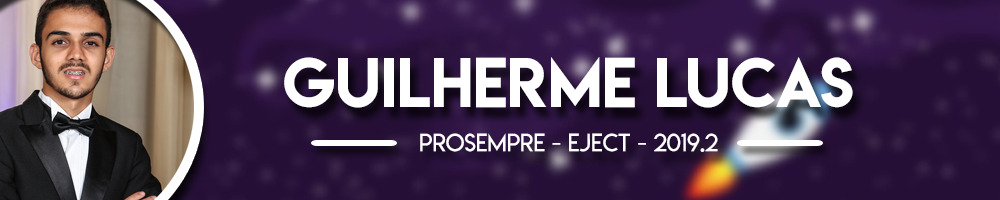
<style>
.page{position:relative;width:1000px;height:200px}
.page>*{position:absolute;margin:0}
.t1{font:62.2px "LemonMilk";color:#ffffff}
.t2{font:24.2px "LemonMilklight";color:#ffffff}
</style>
<div class="page">
<p class="t1" style="left:284px;top:57px;width:569px;height:51px">Guilherme Lucas</p>
<p class="t2" style="left:420px;top:133px;width:298px;height:19px">ProSempre - eject - 2019.2</p>
</div>
